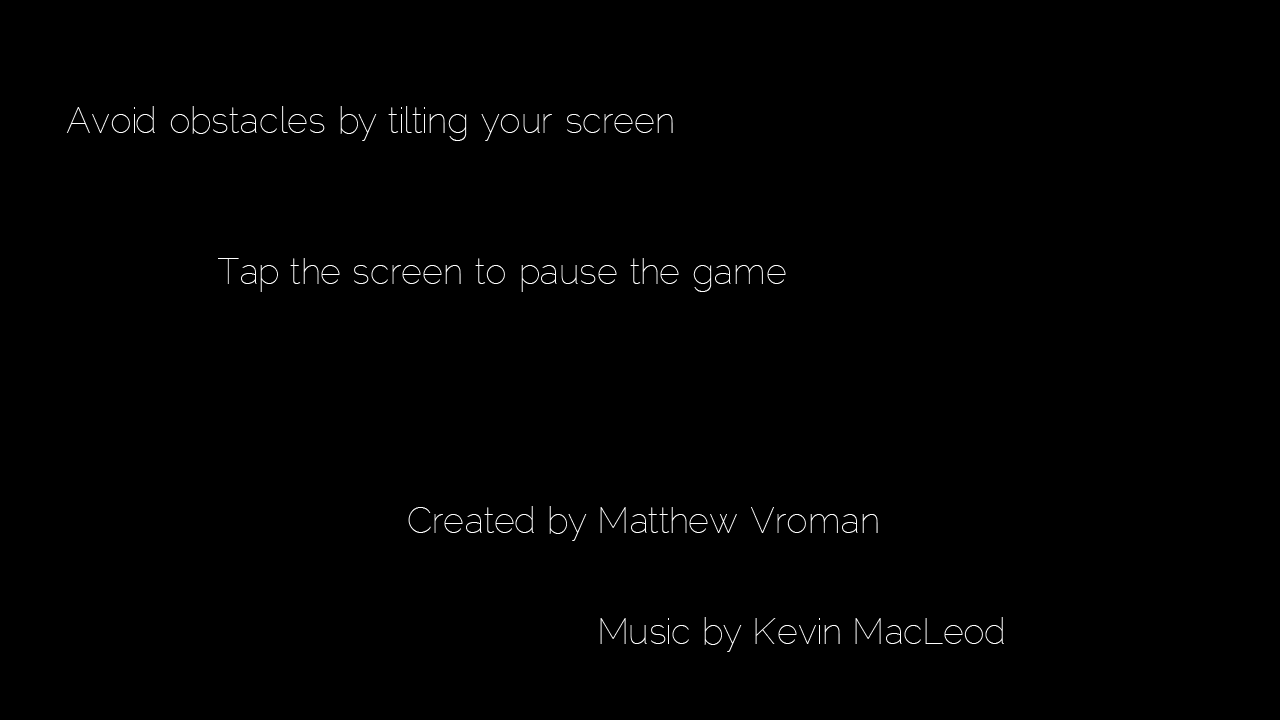
<style>
.page{position:relative;width:1280px;height:720px;background:#000000}
.page>*{position:absolute;margin:0}
.t1{font:36px "Raleway-Thin";color:#ffffff}
</style>
<div class="page">
<p class="t1" style="left:66px;top:106px;width:607px;height:35px">Avoid obstacles by tilting your screen</p>
<p class="t1" style="left:218px;top:258px;width:568px;height:34px">Tap the screen to pause the game</p>
<p class="t1" style="left:408px;top:506px;width:470px;height:35px">Created by Matthew Vroman</p>
<p class="t1" style="left:600px;top:617px;width:404px;height:35px">Music by Kevin MacLeod</p>
</div>
